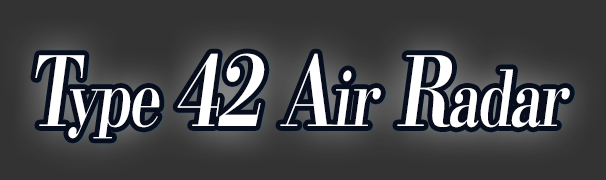
<style>
.page{position:relative;width:606px;height:180px;background:#333333}
.page>*{position:absolute;margin:0}
.t1{font:96px "KochoStd-Heavy";letter-spacing:-0.04em;color:#ffffff;font-style:italic;scale:0.75 1}
.t2{font:76.8px "KochoStd-Heavy";letter-spacing:-0.04em;color:#ffffff;font-style:italic;scale:0.75 1}
</style>
<div class="page">
<p class="t1" style="left:35px;top:53px;width:535px;height:86px">T<span class="t2">ype </span>42 A<span class="t2">ir</span> R<span class="t2">adar</span></p>
</div>
